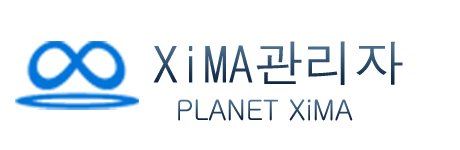
<style>
.page{position:relative;width:460px;height:150px;background:#ffffff}
.page>*{position:absolute;margin:0}
.t1{font:86px "DotumChe"}
.t2{font:47.5px "Gulim"}
</style>
<div class="page">
<p class="t1" style="left:153px;top:41px;width:250px;height:44px">XiMA관리자</p>
<p class="t2" style="left:178px;top:99px;width:175px;height:22px">PLANET XiMA</p>
</div>
